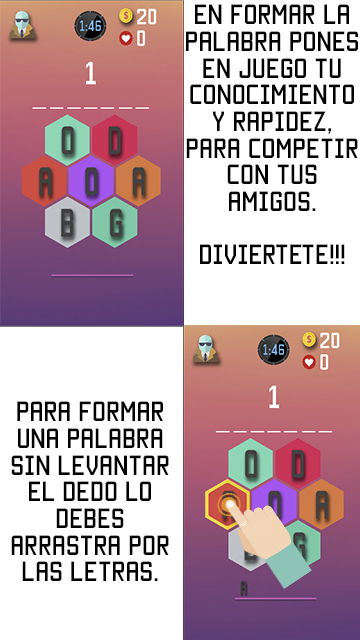
<style>
.page{position:relative;width:360px;height:640px;background:#ffffff}
.page>*{position:absolute;margin:0}
.t1{font:22.2px "Manteka";color:#000000}
</style>
<div class="page">
<p class="t1" style="left:186px;top:4px;width:172px;height:260px;text-align:center">EN Formar lA <br>Palabra pones en juego tu <br>conocimiento y rapidez, para competir con tus amigos.<br><br>DIVIERTETE!!!</p>
<p class="t1" style="left:11px;top:401px;width:158px;height:180px;text-align:center">para formar una palabra sin levantar el dedo lo debes <br>arrastra por las letras.</p>
</div>
